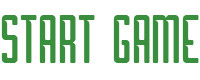
<style>
.page{position:relative;width:200px;height:80px;background:#ffffff}
.page>*{position:absolute;margin:0}
.t1{font:72px "Borg";color:#398f3d}
</style>
<div class="page">
<p class="t1" style="left:1px;top:15px;width:198px;height:48px">START GAME</p>
</div>
